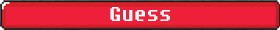
<style>
.page{position:relative;width:280px;height:30px;background:#ee1f39}
.page>*{position:absolute;margin:0}
.t1{font:20px "Fixedsys";color:#ffffff}
</style>
<div class="page">
<p class="t1" style="left:110px;top:7px;width:60px;height:14px">Guess</p>
</div>
